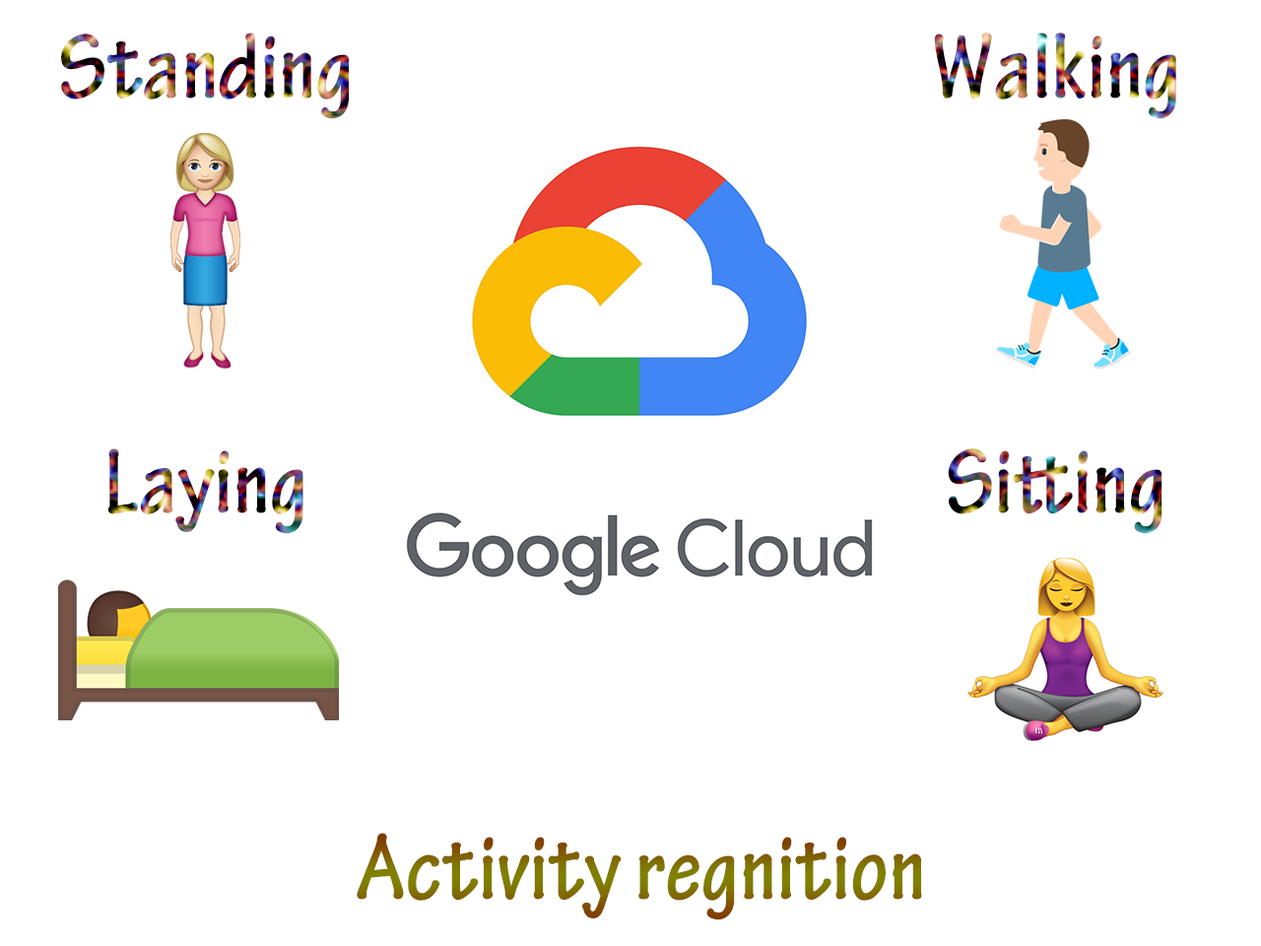
<style>
.page{position:relative;width:1261px;height:946px;background:#ffffff}
.page>*{position:absolute;margin:0}
.t1{font:98.5px "TektonPro-BoldCond"}
.t2{font:98.5px "TektonPro-BoldCond";color:#817200}
</style>
<div class="page">
<p class="t1" style="left:61px;top:33px;width:288px;height:86px">Standing</p>
<p class="t1" style="left:934px;top:33px;width:242px;height:86px">Walking</p>
<p class="t1" style="left:107px;top:448px;width:196px;height:86px">Laying</p>
<p class="t1" style="left:948px;top:448px;width:214px;height:86px">Sitting</p>
<p class="t2" style="left:357px;top:832px;width:565px;height:88px">Activity regnition</p>
</div>
